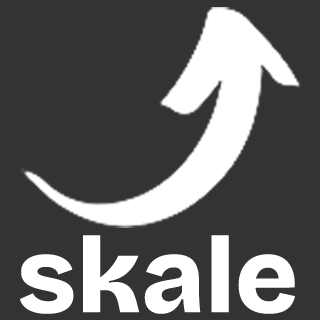
<style>
.page{position:relative;width:320px;height:320px;background:#333333}
.page>*{position:absolute;margin:0}
.t1{font:106.8px "BricolageGrotesque-ExtraBold";color:#ffffff}
</style>
<div class="page">
<p class="t1" style="left:20px;top:235px;width:275px;height:79px">skale</p>
</div>
